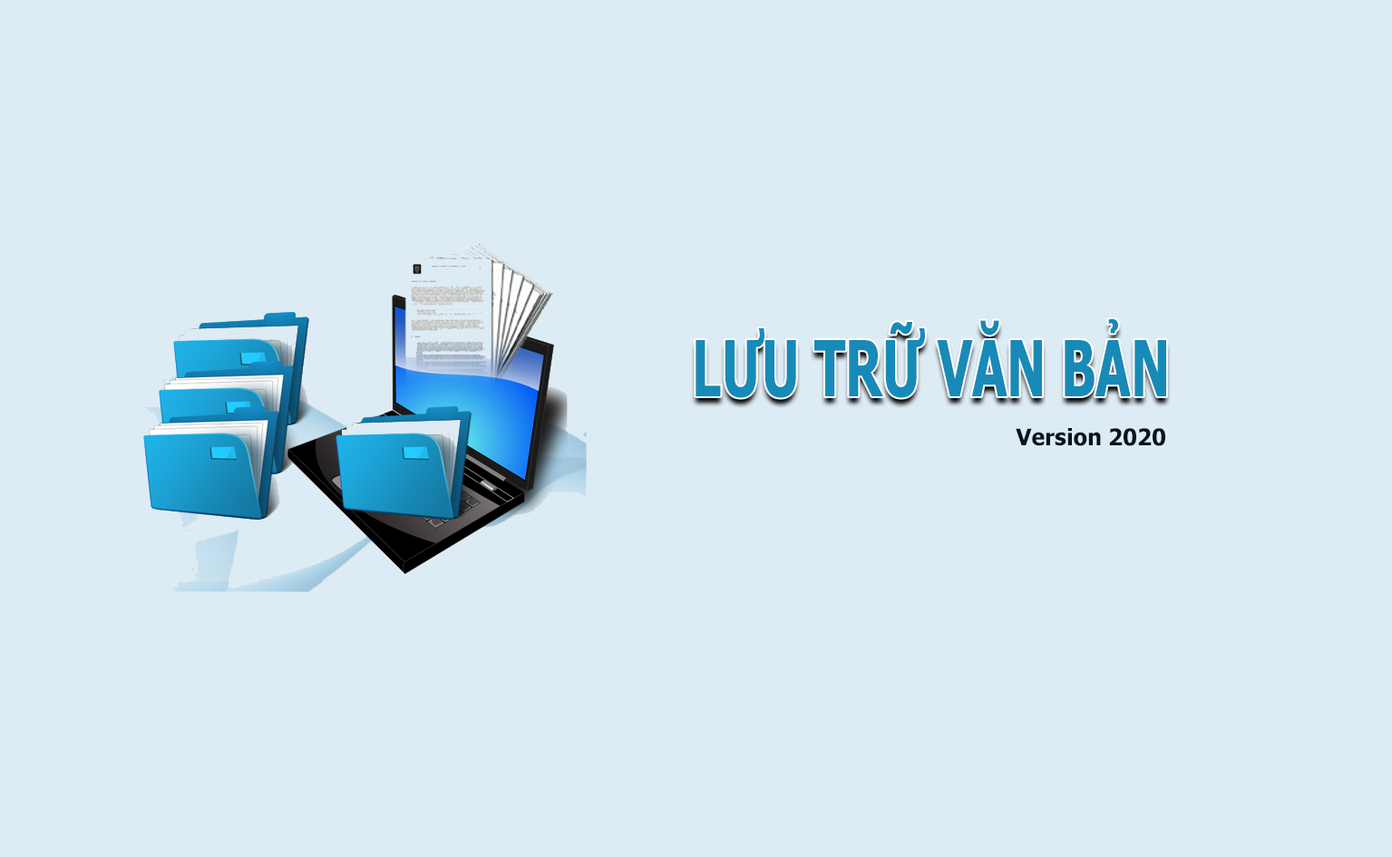
<style>
.page{position:relative;width:1392px;height:857px;background:#ddebf4}
.page>*{position:absolute;margin:0}
.t1{font:77.2px "Tahoma-Bold";color:#178ab7;scale:0.66 1}
.t2{font:22.7px "Tahoma-Bold";color:#05141d}
</style>
<div class="page">
<p class="t1" style="left:695px;top:318px;width:471px;height:80px">LƯU TRỮ VĂN BẢN</p>
<p class="t2" style="left:1015px;top:428px;width:150px;height:18px">Version 2020</p>
</div>
